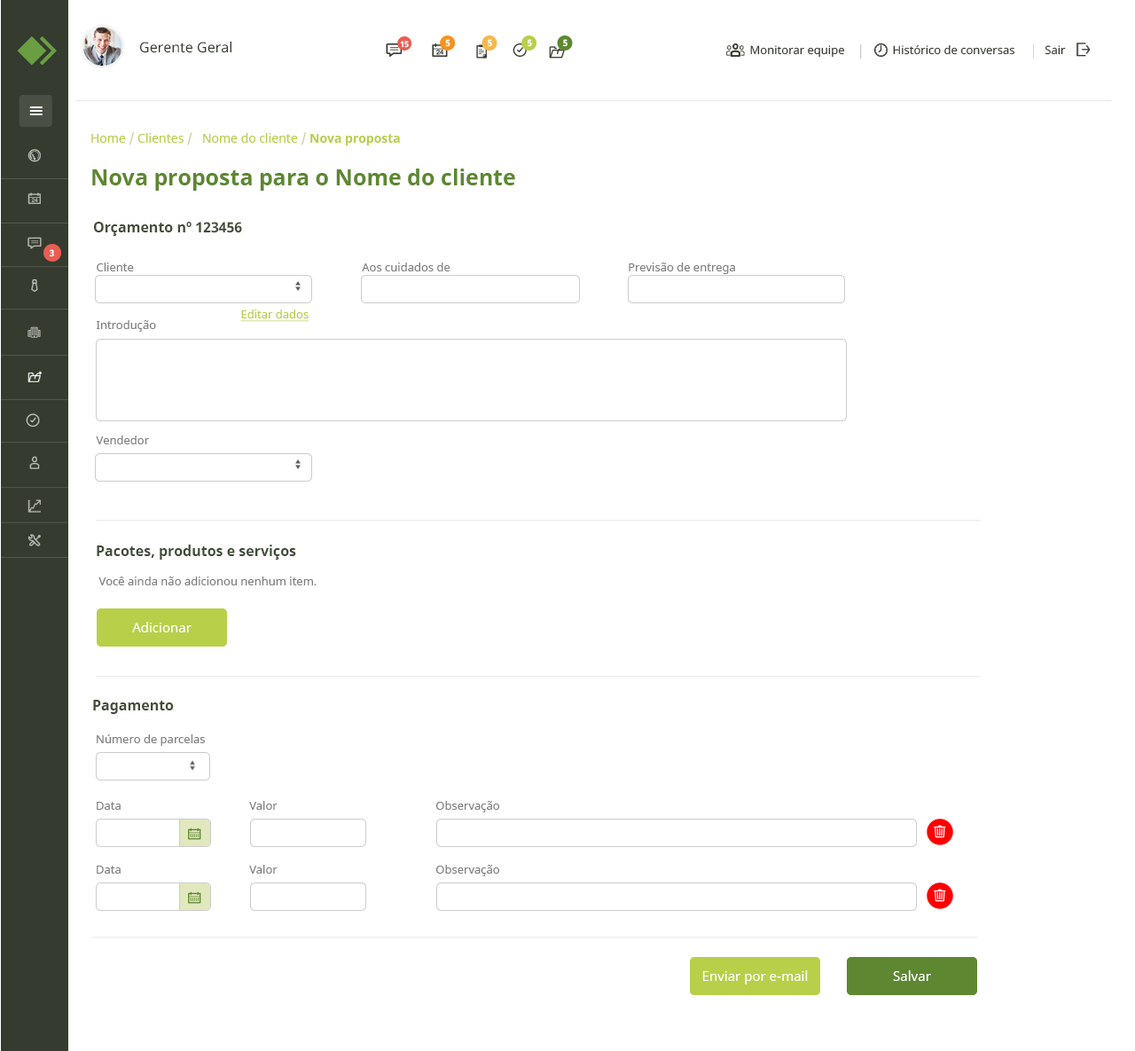
<style>
.page{position:relative;width:1135px;height:1051px;background:#ffffff}
.page>*{position:absolute;margin:0}
.t1{font:14.2px "NotoSans";color:#353b2f}
.t2{font:8px "NotoSans-Bold";color:#ffffff}
.t3{font:8.9px "NotoSans-Bold";color:#ffffff}
.t4{font:11.5px "NotoSans";color:#353b2f}
.t5{font:12.4px "NotoSans";color:#b8cf49}
.t6{font:12.4px "NotoSans";color:#c7cfa1}
.t7{font:12.4px "NotoSans-Bold";color:#b8cf49}
.t8{font:22.2px "NotoSans-Bold";color:#5d8730}
.t9{font:14.2px "NotoSans-Bold";color:#424d38}
.t10{font:11.5px/57.6px "NotoSans";color:#808080}
.t11{font:11.5px "NotoSans";color:#808080}
.t12{font:11.5px "NotoSans";color:#b8cf49;text-decoration:underline}
.t13{font:13.3px "NotoSans";color:#ffffff}
</style>
<div class="page">
<p class="t1" style="left:140px;top:41px;width:91px;height:12px">Gerente Geral</p>
<p class="t2" style="left:400px;top:41px;width:9px;height:7px">15</p>
<p class="t3" style="left:445px;top:39px;width:5px;height:8px">5</p>
<p class="t3" style="left:488px;top:39px;width:4px;height:8px">5</p>
<p class="t3" style="left:528px;top:39px;width:4px;height:8px">5</p>
<p class="t3" style="left:563px;top:39px;width:4px;height:8px">5</p>
<p class="t4" style="left:750px;top:44px;width:316px;height:14px">Monitorar equipe                Histórico de conversas          Sair</p>
<p class="t5" style="left:91px;top:132px;width:309px;height:13px">Home <span class="t6">/</span> Clientes <span class="t6">/</span>   Nome do cliente <span class="t6">/ </span><span class="t7">Nova proposta</span></p>
<p class="t8" style="left:92px;top:168px;width:423px;height:23px">Nova proposta para o Nome do cliente</p>
<p class="t9" style="left:94px;top:222px;width:148px;height:14px">Orçamento nº 123456</p>
<p class="t3" style="left:50px;top:249px;width:4px;height:8px">3</p>
<p class="t10" style="left:96px;top:262px;width:60px;height:182px">Cliente<br>Introdução<br><br>Vendedor</p>
<p class="t11" style="left:362px;top:262px;width:88px;height:9px">Aos cuidados de</p>
<p class="t11" style="left:629px;top:262px;width:106px;height:12px">Previsão de entrega</p>
<p class="t12" style="left:240px;top:309px;width:69px;height:13px">Editar dados</p>
<p class="t9" style="left:97px;top:544px;width:199px;height:15px">Pacotes, produtos e serviços</p>
<p class="t11" style="left:98px;top:576px;width:219px;height:10px">Você ainda não adicionou nenhum item.</p>
<p class="t13" style="left:132px;top:622px;width:60px;height:10px">Adicionar</p>
<p class="t9" style="left:93px;top:700px;width:81px;height:14px">Pagamento</p>
<p class="t11" style="left:97px;top:734px;width:108px;height:12px">Número de parcelas</p>
<p class="t11" style="left:97px;top:802px;width:24px;height:8px">Data</p>
<p class="t11" style="left:249px;top:801px;width:29px;height:9px">Valor</p>
<p class="t11" style="left:435px;top:801px;width:64px;height:11px">Observação</p>
<p class="t11" style="left:97px;top:865px;width:24px;height:8px">Data</p>
<p class="t11" style="left:249px;top:864px;width:29px;height:9px">Valor</p>
<p class="t11" style="left:435px;top:864px;width:64px;height:12px">Observação</p>
<p class="t13" style="left:702px;top:970px;width:106px;height:14px">Enviar por e-mail</p>
<p class="t13" style="left:893px;top:970px;width:38px;height:11px">Salvar</p>
</div>
